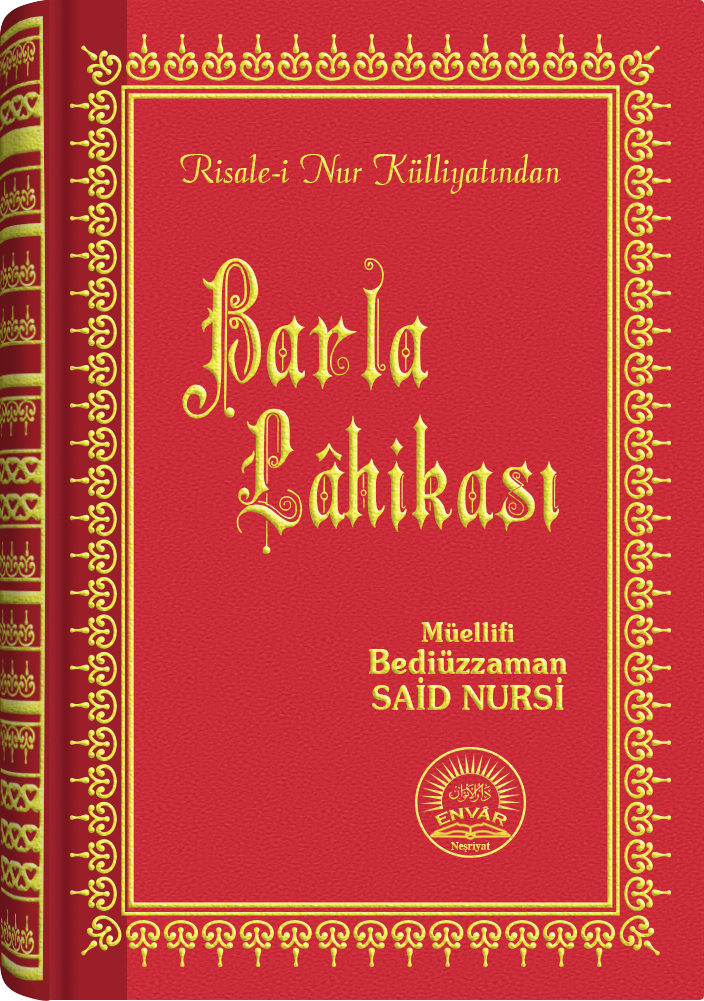
<style>
.page{position:relative;width:704px;height:1001px}
.page>*{position:absolute;margin:0}
.t1{font:45.3px "Barla © 072 Aria ScriptScriptSSi";scale:0.94 1}
.t2{font:161.6px "Barla © 001 Liva Nur";letter-spacing:-0.001em;scale:0.92 1}
.t3{font:149.9px "Barla © 001 Liva Nur";letter-spacing:-0.001em;scale:0.93 1}
.t4{font:33.4px/32.4px "SouvenirITCbyBT-Demi";scale:0.93 1}
.t5{font:27.4px/24.4px "SouvenirITCbyBT-Demi";scale:0.93 1}
.t6{font:33.4px/36.4px "SouvenirITCbyBT-Demi";scale:0.93 1}
.t7{font:15.6px "CopperplateGothic-Bold"}
.t8{font:11.2px "Times-Bold";scale:0.96 1}
</style>
<div class="page">
<p class="t1" style="left:180px;top:154px;width:381px;height:40px">Risale-i Nur Külliyatından</p>
<p class="t2" style="left:182px;top:258px;width:246px;height:161px">Barla</p>
<p class="t3" style="left:236px;top:408px;width:323px;height:146px">Lâhikası</p>
<p class="t4" style="left:369px;top:622px;width:198px;height:88px;text-align:center"><span class="t5">Müellifi<br></span>Bediüzzaman<br><span class="t6">SAİD NURSİ</span></p>
<p class="t7" style="left:434px;top:806px;width:73px;height:21px">ENVÂR</p>
<p class="t8" style="left:451px;top:842px;width:39px;height:10px">Neşriyat</p>
</div>
